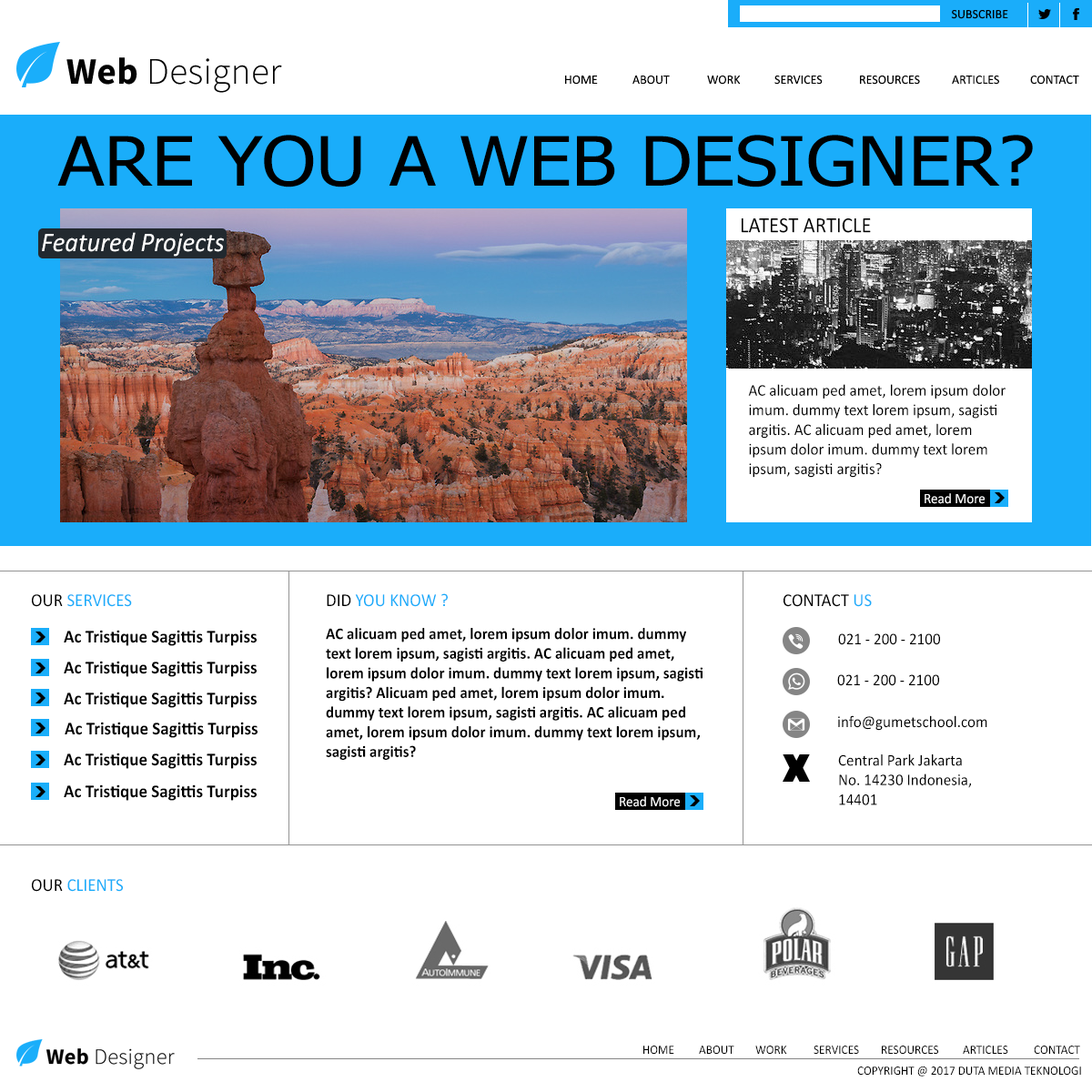
<style>
.page{position:relative;width:1092px;height:1092px;background:#ffffff}
.page>*{position:absolute;margin:0}
.t1{font:12.7px "Calibri";color:#000000}
.t2{font:68.2px "Tahoma";color:#000000;scale:1.12 1}
.t3{font:21.8px "Calibri";color:#000000;scale:0.95 1}
.t4{font:27.3px "Calibri-Italic";color:#ffffff;scale:0.95 1}
.t5{font:16.4px "Calibri";color:#000000;scale:0.95 1}
.t6{font:14.6px "Calibri";color:#ffffff;scale:0.95 1}
.t7{font:18.2px "Calibri";color:#1aadfa;scale:0.95 1}
.t8{font:18.2px "Calibri";color:#000000;scale:0.95 1}
.t9{font:18.2px "Calibri-Bold";color:#000000;scale:0.95 1}
.t10{font:16.4px "Calibri-Bold";color:#000000;scale:0.95 1}
.t11{font:16.4px "Calibri";color:#010101;scale:0.95 1}
.t12{font:12.7px "Calibri";color:#000000;scale:0.95 1}
</style>
<div class="page">
<p class="t1" style="left:951px;top:10px;width:57px;height:9px">SUBSCRIBE</p>
<p class="t1" style="left:565px;top:76px;width:33px;height:9px">HOME</p>
<p class="t1" style="left:632px;top:76px;width:38px;height:9px">ABOUT</p>
<p class="t1" style="left:707px;top:76px;width:34px;height:9px">WORK</p>
<p class="t1" style="left:774px;top:76px;width:49px;height:9px">SERVICES</p>
<p class="t1" style="left:860px;top:76px;width:60px;height:9px">RESOURCES</p>
<p class="t1" style="left:952px;top:76px;width:47px;height:9px">ARTICLES</p>
<p class="t1" style="left:1030px;top:76px;width:49px;height:9px">CONTACT</p>
<p class="t2" style="left:57px;top:135px;width:976px;height:52px">ARE YOU A WEB DESIGNER?</p>
<p class="t3" style="left:742px;top:217px;width:129px;height:16px">LATEST ARTICLE</p>
<p class="t4" style="left:42px;top:232px;width:182px;height:25px">Featured Projects</p>
<p class="t5" style="left:748px;top:384px;width:258px;height:94px">AC alicuam ped amet, lorem ipsum dolor imum. dummy text lorem ipsum, sagisti argitis. AC alicuam ped amet, lorem ipsum dolor imum. dummy text lorem ipsum, sagisti argitis?</p>
<p class="t6" style="left:925px;top:493px;width:60px;height:11px">Read More</p>
<p class="t7" style="left:327px;top:593px;width:121px;height:14px"><span class="t8">DID </span>YOU KNOW ?</p>
<p class="t7" style="left:32px;top:594px;width:100px;height:13px"><span class="t8">OUR </span>SERVICES</p>
<p class="t8" style="left:783px;top:594px;width:89px;height:13px">CONTACT <span class="t7">US</span></p>
<p class="t9" style="left:64px;top:630px;width:193px;height:16px">Ac Tristique Sagittis Turpiss</p>
<p class="t10" style="left:326px;top:628px;width:377px;height:132px">AC alicuam ped amet, lorem ipsum dolor imum. dummy text lorem ipsum, sagisti argitis. AC alicuam ped amet, lorem ipsum dolor imum. dummy text lorem ipsum, sagisti argitis? Alicuam ped amet, lorem ipsum dolor imum. dummy text lorem ipsum, sagisti argitis. AC alicuam ped amet, lorem ipsum dolor imum. dummy text lorem ipsum, sagisti argitis?</p>
<p class="t5" style="left:838px;top:633px;width:102px;height:12px">021 - 200 - 2100</p>
<p class="t9" style="left:64px;top:661px;width:193px;height:16px">Ac Tristique Sagittis Turpiss</p>
<p class="t5" style="left:837px;top:674px;width:102px;height:12px">021 - 200 - 2100</p>
<p class="t9" style="left:64px;top:692px;width:193px;height:16px">Ac Tristique Sagittis Turpiss</p>
<p class="t9" style="left:65px;top:722px;width:193px;height:16px">Ac Tristique Sagittis Turpiss</p>
<p class="t5" style="left:838px;top:715px;width:149px;height:16px">info@gumetschool.com</p>
<p class="t9" style="left:64px;top:753px;width:193px;height:16px">Ac Tristique Sagittis Turpiss</p>
<p class="t11" style="left:838px;top:754px;width:133px;height:51px">Central Park Jakarta No. 14230 Indonesia, 14401</p>
<p class="t9" style="left:64px;top:784px;width:193px;height:17px">Ac Tristique Sagittis Turpiss</p>
<p class="t6" style="left:620px;top:796px;width:60px;height:11px">Read More</p>
<p class="t7" style="left:32px;top:879px;width:91px;height:13px"><span class="t8">OUR </span>CLIENTS</p>
<p class="t12" style="left:643px;top:1046px;width:31px;height:9px">HOME</p>
<p class="t12" style="left:699px;top:1046px;width:35px;height:9px">ABOUT</p>
<p class="t12" style="left:755px;top:1046px;width:32px;height:9px">WORK</p>
<p class="t12" style="left:814px;top:1046px;width:45px;height:9px">SERVICES</p>
<p class="t12" style="left:882px;top:1046px;width:56px;height:9px">RESOURCES</p>
<p class="t12" style="left:963px;top:1046px;width:45px;height:9px">ARTICLES</p>
<p class="t12" style="left:1034px;top:1046px;width:46px;height:9px">CONTACT</p>
<p class="t12" style="left:857px;top:1067px;width:224px;height:10px">COPYRIGHT @ 2017 DUTA MEDIA TEKNOLOGI</p>
</div>
